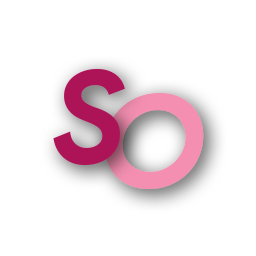
<style>
.page{position:relative;width:256px;height:256px;background:#ffffff}
.page>*{position:absolute;margin:0}
.t1{font:129px "ProductSans-BoldItalic";letter-spacing:-0.22em;color:#ad1457}
.t2{font:129px "ProductSans-BoldItalic";letter-spacing:-0.22em;color:#f48fb1}
</style>
<div class="page">
<p class="t1" style="left:53px;top:69px;width:72px;height:96px">S</p>
<p class="t2" style="left:104px;top:93px;width:100px;height:96px">O</p>
</div>
